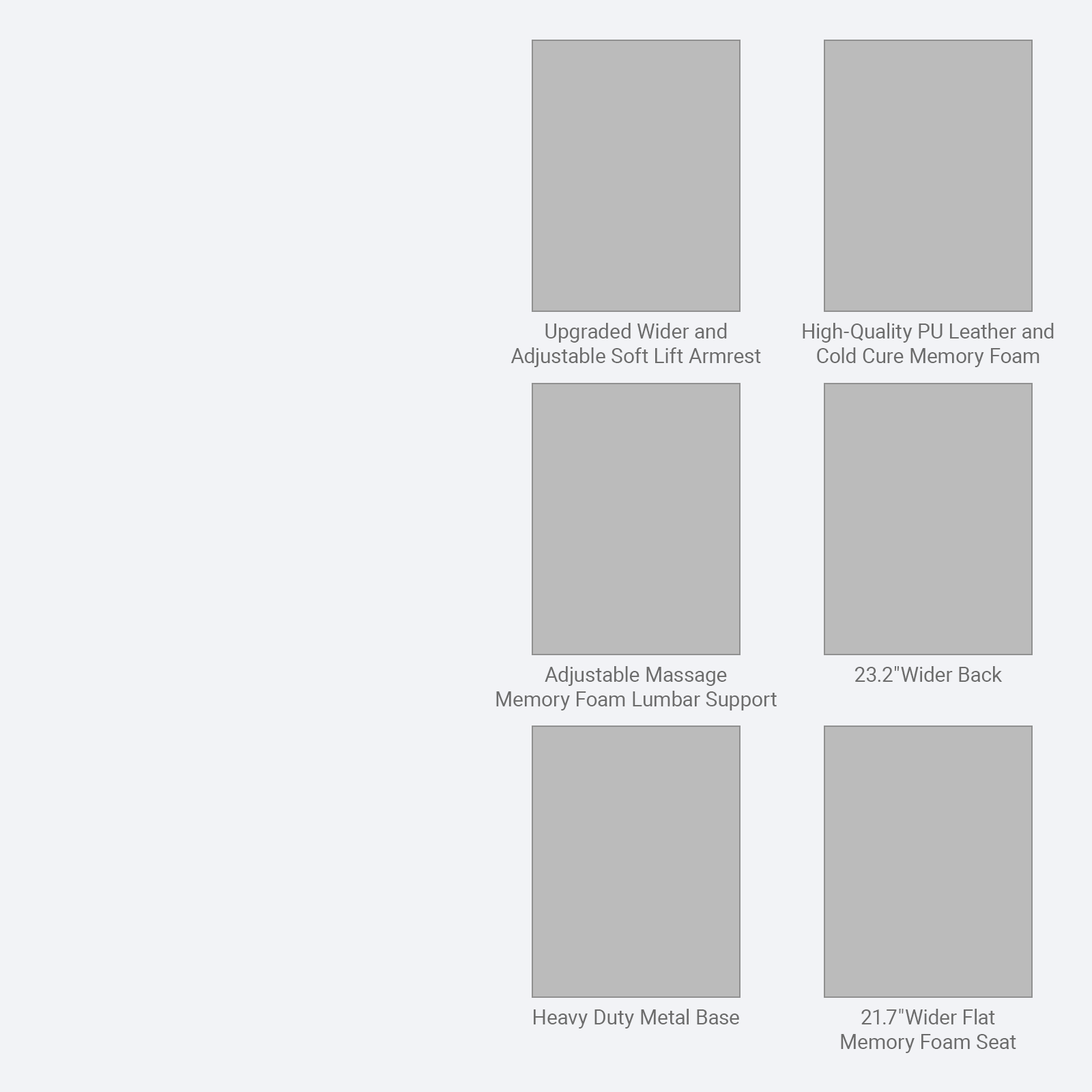
<style>
.page{position:relative;width:1092px;height:1092px;background:#f2f3f6}
.page>*{position:absolute;margin:0}
.t1{font:20.5px "Roboto-Regular";color:#6c6c6c}
</style>
<div class="page">
<p class="t1" style="left:511px;top:323px;width:250px;height:44px;text-align:center">Upgraded Wider and<br>Adjustable Soft Lift Armrest</p>
<p class="t1" style="left:803px;top:323px;width:251px;height:44px;text-align:center">High-Quality PU Leather and<br>Cold Cure Memory Foam</p>
<p class="t1" style="left:496px;top:666px;width:281px;height:44px;text-align:center">Adjustable Massage<br>Memory Foam Lumbar Support</p>
<p class="t1" style="left:854px;top:666px;width:149px;height:16px">23.2"Wider Back</p>
<p class="t1" style="left:534px;top:1009px;width:205px;height:20px">Heavy Duty Metal Base</p>
<p class="t1" style="left:841px;top:1009px;width:175px;height:44px;text-align:center">21.7"Wider Flat<br>Memory Foam Seat</p>
</div>
